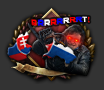
<style>
.page{position:relative;width:104px;height:90px;background:#333333}
.page>*{position:absolute;margin:0}
.t1{font:7.9px "CopperplateGothic-Bold"}
</style>
<div class="page">
<p class="t1" style="left:31px;top:16px;width:59px;height:10px;rotate:-2deg">BRRRRRRRT!</p>
</div>
